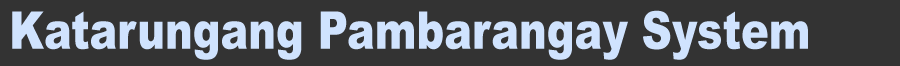
<style>
.page{position:relative;width:900px;height:66px;background:#333333}
.page>*{position:absolute;margin:0}
.t1{font:52px "Arial-Black";color:#d0e3fe;scale:0.8 1}
</style>
<div class="page">
<p class="t1" style="left:12px;top:10px;width:796px;height:50px">Katarungang Pambarangay System</p>
</div>
